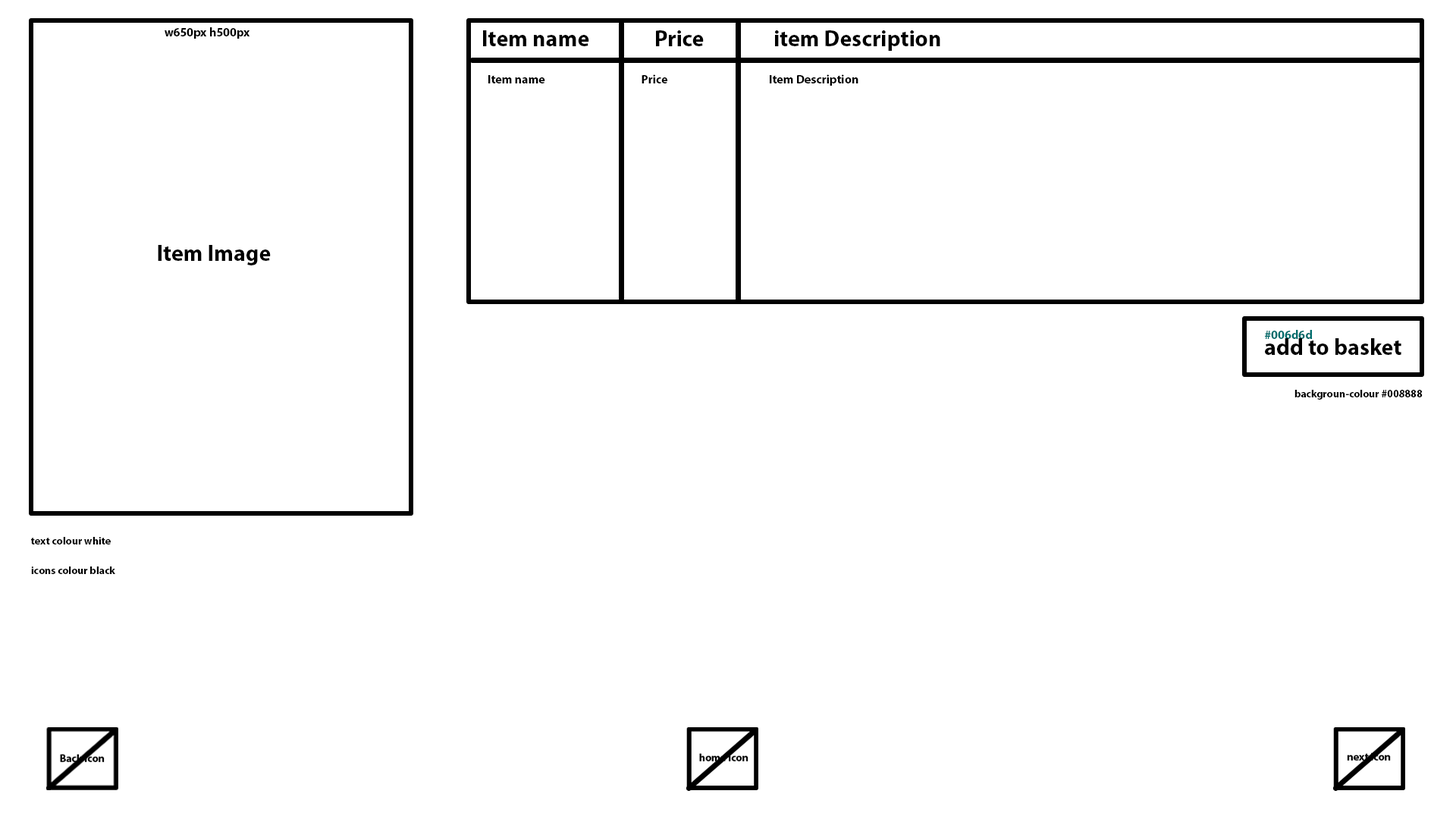
<style>
.page{position:relative;width:1456px;height:819px;background:#ffffff}
.page>*{position:absolute;margin:0}
.t1{font:12.1px "MyriadPro-Bold";color:#000000}
.t2{font:22.7px "MyriadPro-Bold";color:#000000}
.t3{font:12.1px "MyriadPro-Bold";color:#006d6d}
.t4{font:10.6px "MyriadPro-Bold";color:#000000}
</style>
<div class="page">
<p class="t1" style="left:165px;top:27px;width:85px;height:12px">w650px h500px</p>
<p class="t2" style="left:483px;top:30px;width:106px;height:16px">Item name</p>
<p class="t2" style="left:656px;top:30px;width:48px;height:16px">Price</p>
<p class="t2" style="left:775px;top:30px;width:165px;height:21px">item Description</p>
<p class="t1" style="left:488px;top:75px;width:57px;height:8px">Item name</p>
<p class="t1" style="left:642px;top:74px;width:25px;height:9px">Price</p>
<p class="t1" style="left:770px;top:74px;width:88px;height:12px">Item Description</p>
<p class="t2" style="left:158px;top:245px;width:113px;height:20px">Item Image</p>
<p class="t3" style="left:1265px;top:330px;width:47px;height:9px">#006d6d</p>
<p class="t2" style="left:1265px;top:338px;width:136px;height:17px">add to basket</p>
<p class="t4" style="left:1294px;top:390px;width:129px;height:10px">backgroun-colour #008888</p>
<p class="t4" style="left:31px;top:537px;width:80px;height:7px">text colour white</p>
<p class="t4" style="left:31px;top:566px;width:84px;height:8px">icons colour black</p>
</div>
